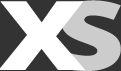
<style>
.page{position:relative;width:121px;height:71px;background:#ffffff}
.page>*{position:absolute;margin:0}
.t1{font:96px "OpenSans-Extrabold";letter-spacing:-0.2em;color:#ffffff;text-transform:uppercase;scale:1.25 1}
.t2{font:96px "OpenSans-Extrabold";letter-spacing:-0.3em;color:#cccccc;text-transform:uppercase;scale:1.25 1}
</style>
<div class="page">
<p class="t1" style="left:0px;top:1px;width:86px;height:69px">X</p>
<p class="t2" style="left:60px;top:0px;width:61px;height:71px">S</p>
</div>
